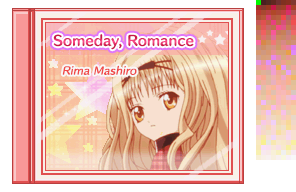
<style>
.page{position:relative;width:296px;height:192px}
.page>*{position:absolute;margin:0}
.t1{font:13px "HummingStd-B";letter-spacing:0.02em}
.t2{font:10px "HummingStd-D";letter-spacing:0.02em;color:#f04848;font-style:italic}
</style>
<div class="page">
<p class="t1" style="left:53px;top:34px;width:141px;height:16px">Someday, Romance</p>
<p class="t2" style="left:62px;top:65px;width:75px;height:10px">Rima Mashiro</p>
</div>
